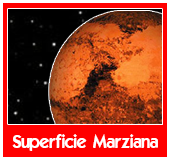
<style>
.page{position:relative;width:170px;height:160px;background:#ff0000}
.page>*{position:absolute;margin:0}
.t1{font:18px "ELEGANCE";color:#ffffff}
</style>
<div class="page">
<p class="t1" style="left:12px;top:134px;width:146px;height:17px">Superficie Marziana</p>
</div>
